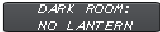
<style>
.page{position:relative;width:160px;height:32px}
.page>*{position:absolute;margin:0}
.t1{font:14px "ZeldaDXTTBRK";color:#ffffff}
</style>
<div class="page">
<p class="t1" style="left:38px;top:4px;width:95px;height:26px;text-align:center">DARK ROOM:<br>NO LANTERN</p>
</div>
